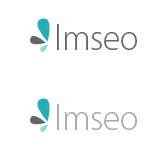
<style>
.page{position:relative;width:160px;height:160px;background:#ffffff}
.page>*{position:absolute;margin:0}
.t1{font:35.4px "MyriadPro-Light";color:#666666}
.t2{font:35.4px "MyriadPro-Light";color:#03737d}
.t3{font:35.4px "MyriadPro-Light";color:#a8a8a8}
</style>
<div class="page">
<p class="t1" style="left:57px;top:24px;width:80px;height:26px"><span class="t2"> </span>lmseo</p>
<p class="t3" style="left:57px;top:104px;width:80px;height:26px">lmseo</p>
</div>
